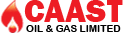
<style>
.page{position:relative;width:124px;height:35px;background:#ffffff}
.page>*{position:absolute;margin:0}
.t1{font:33px "FranklinGothic-Heavy";color:#ed1c24}
.t2{font:10px "ArialRoundedMTBold";color:#000000}
</style>
<div class="page">
<p class="t1" style="left:24px;top:0px;width:99px;height:22px">CAAST</p>
<p class="t2" style="left:26px;top:25px;width:95px;height:7px">OIL &amp; GAS LIMITED</p>
</div>
